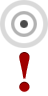
<style>
.page{position:relative;width:48px;height:96px;background:#ffffff}
.page>*{position:absolute;margin:0}
.t1{font:55px "Georgia-Bold";color:#a00000;text-transform:uppercase}
</style>
<div class="page">
<p class="t1" style="left:19px;top:52px;width:11px;height:40px">!</p>
</div>
